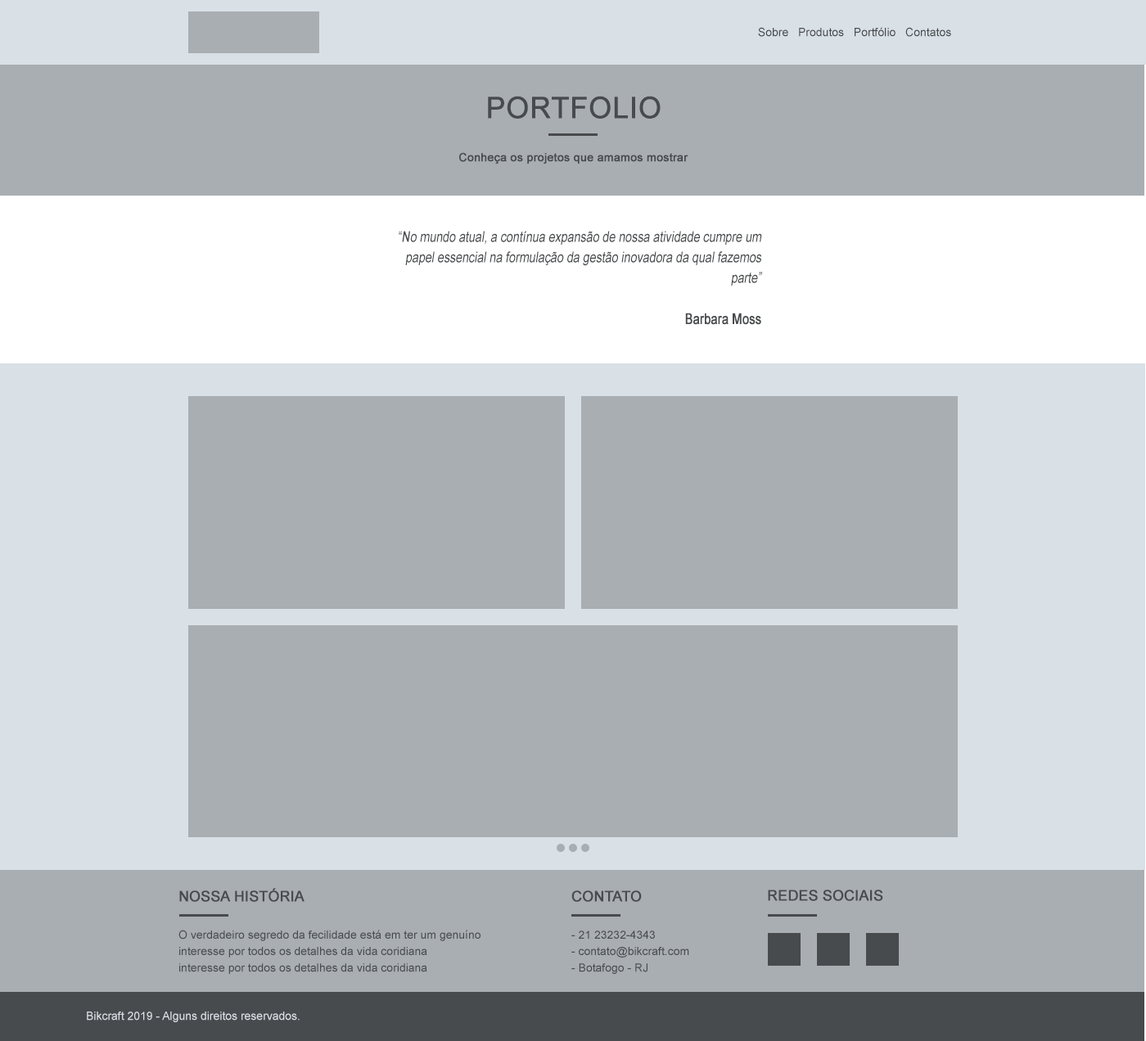
<style>
.page{position:relative;width:1146px;height:1041px;background:#a9aeb3}
.page>*{position:absolute;margin:0}
.t1{font:11.8px "ArialMT";color:#484b4d}
.t2{font:29.5px "ArialMT";color:#484b4d;text-transform:uppercase;font-weight:bold}
.t3{font:11.5px "ArialMT";color:#484b4d;font-weight:bold}
.t4{font:14.8px/20.5px "ArialMT";color:#484b4d;font-style:italic;scale:0.79 1}
.t5{font:14.8px/20.5px "ArialMT";color:#484b4d;font-weight:bold;scale:0.79 1}
.t6{font:14.6px "ArialMT";color:#484b4d;text-transform:uppercase;font-weight:bold}
.t7{font:14.5px "ArialMT";color:#484b4d;text-transform:uppercase;font-weight:bold}
.t8{font:11.5px/16.4px "ArialMT";color:#484b4d}
.t9{font:11.8px "ArialMT";color:#d9e0e6}
</style>
<div class="page">
<p class="t1" style="left:758px;top:27px;width:193px;height:10px">Sobre   Produtos   Portfólio   Contatos</p>
<p class="t2" style="left:488px;top:96px;width:172px;height:23px">portfolio</p>
<p class="t3" style="left:459px;top:152px;width:229px;height:12px">Conheça os projetos que amamos mostrar</p>
<p class="t4" style="left:399px;top:231px;width:363px;height:94px;text-align:right">“No mundo atual, a contínua expansão de nossa atividade cumpre um papel essencial na formulação da gestão inovadora da qual fazemos parte”<br><br><span class="t5">Barbara Moss</span></p>
<p class="t6" style="left:179px;top:888px;width:125px;height:14px">Nossa História</p>
<p class="t7" style="left:571px;top:890px;width:71px;height:12px">contato</p>
<p class="t7" style="left:768px;top:889px;width:115px;height:12px">redes sociais</p>
<p class="t8" style="left:178px;top:930px;width:302px;height:44px">O verdadeiro segredo da fecilidade está em ter um genuíno interesse por todos os detalhes da vida coridiana<br>interesse por todos os detalhes da vida coridiana</p>
<p class="t8" style="left:571px;top:930px;width:118px;height:44px">- 21 23232-4343<br>- contato@bikcraft.com<br>- Botafogo - RJ</p>
<p class="t9" style="left:87px;top:1011px;width:212px;height:11px">Bikcraft 2019 - Alguns direitos reservados.</p>
</div>
